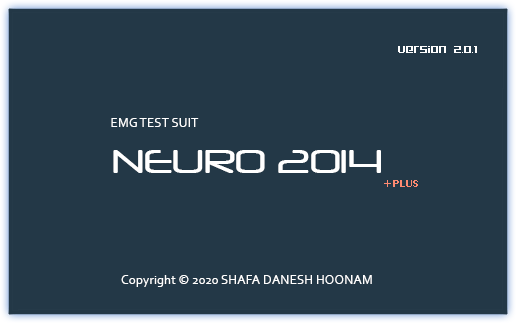
<style>
.page{position:relative;width:516px;height:323px;background:#233847}
.page>*{position:absolute;margin:0}
.t1{font:12px "ft84-Semi-expandedSemiBold";color:#ffffff}
.t2{font:13.3px "Corbel";color:#ffffff}
.t3{font:32px "Neuropol-Regular";color:#ffffff}
.t4{font:10.7px "Exotic350BT-Bold";color:#fe8a71}
</style>
<div class="page">
<p class="t1" style="left:398px;top:46px;width:79px;height:7px">version 2.0.1</p>
<p class="t2" style="left:111px;top:118px;width:88px;height:9px">EMG TEST SUIT</p>
<p class="t3" style="left:113px;top:150px;width:268px;height:23px">NEURO 2014</p>
<p class="t4" style="left:384px;top:180px;width:34px;height:7px">+PLUS</p>
<p class="t2" style="left:121px;top:275px;width:251px;height:12px">Copyright © 2020 SHAFA DANESH HOONAM</p>
</div>
